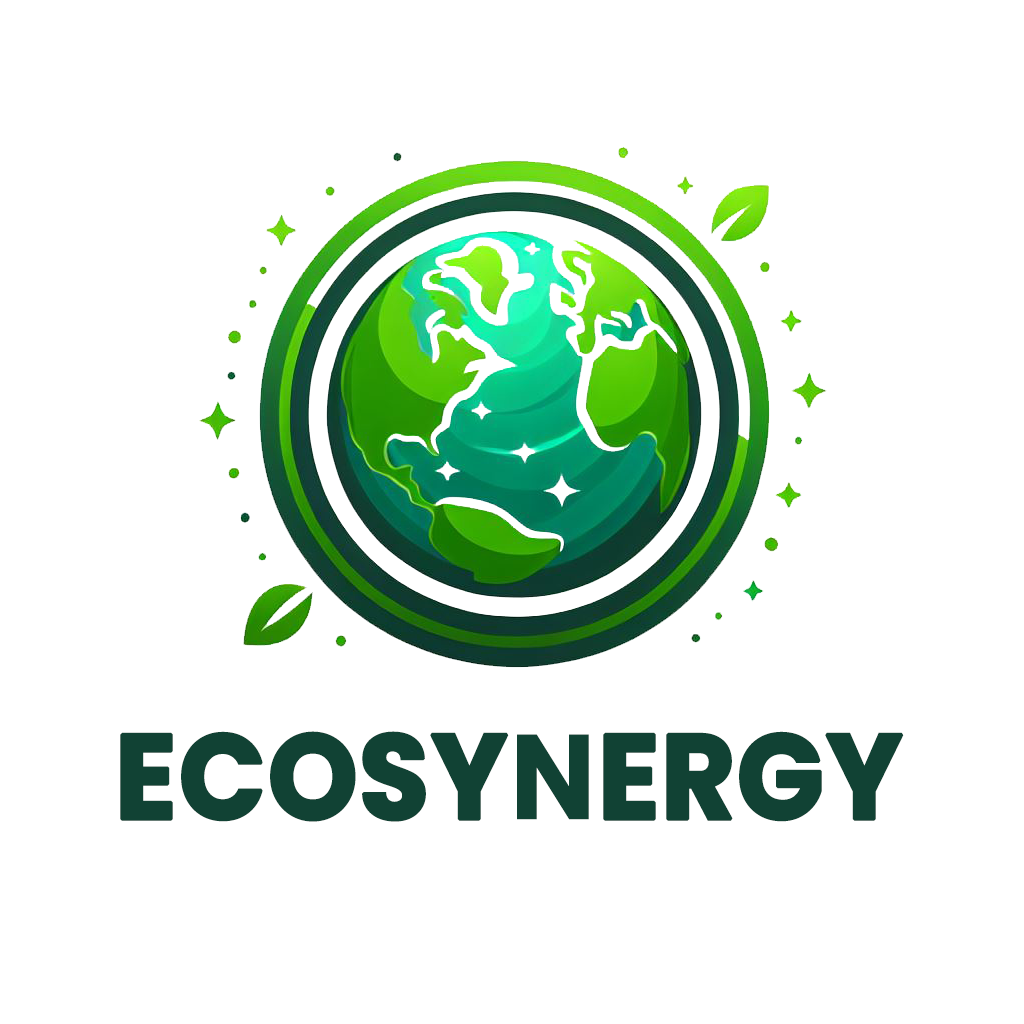
<style>
.page{position:relative;width:1024px;height:1024px;background:#ffffff}
.page>*{position:absolute;margin:0}
.t1{font:120.3px "Poppins-Bold";letter-spacing:-0.01em;color:#114234;font-weight:bold;scale:0.95 1}
</style>
<div class="page">
<p class="t1" style="left:120px;top:731px;width:784px;height:91px">ECOSYNERGY</p>
</div>
